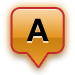
<style>
.page{position:relative;width:75px;height:75px}
.page>*{position:absolute;margin:0}
.t1{font:31.3px "HelveticaNeue-Bold";color:#000000}
</style>
<div class="page">
<p class="t1" style="left:26px;top:18px;width:23px;height:23px">A</p>
</div>
